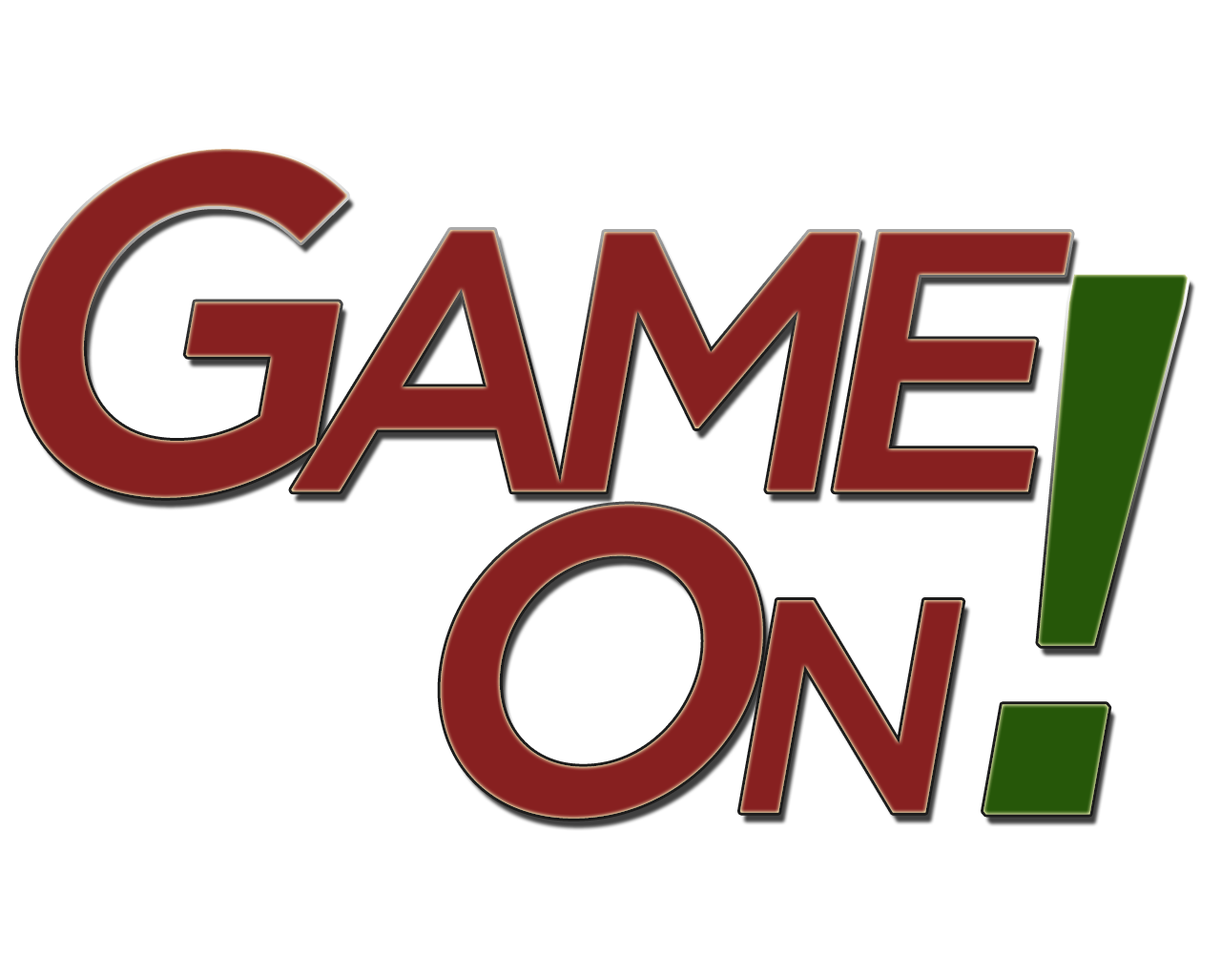
<style>
.page{position:relative;width:1221px;height:977px;background:#ffffff}
.page>*{position:absolute;margin:0}
.t1{font:524.6px "GothamPro-Medium";letter-spacing:-0.15em;color:#872020;font-variant:small-caps;font-weight:bold;font-style:italic}
.t2{font:476.9px "GothamPro-Medium";letter-spacing:-0.15em;color:#872020;font-variant:small-caps;font-weight:bold;font-style:italic}
.t3{font:429.2px "GothamPro-Medium";letter-spacing:-0.13em;color:#872020;font-variant:small-caps;font-weight:bold;font-style:italic}
.t4{font:763px "GothamPro-Medium";letter-spacing:-0.13em;color:#265709;font-variant:small-caps;font-weight:bold;font-style:italic}
</style>
<div class="page">
<p class="t1" style="left:17px;top:149px;width:1055px;height:349px"><span class="t2">G</span>ame</p>
<p class="t3" style="left:440px;top:274px;width:747px;height:544px">On<span class="t4">!</span></p>
</div>
